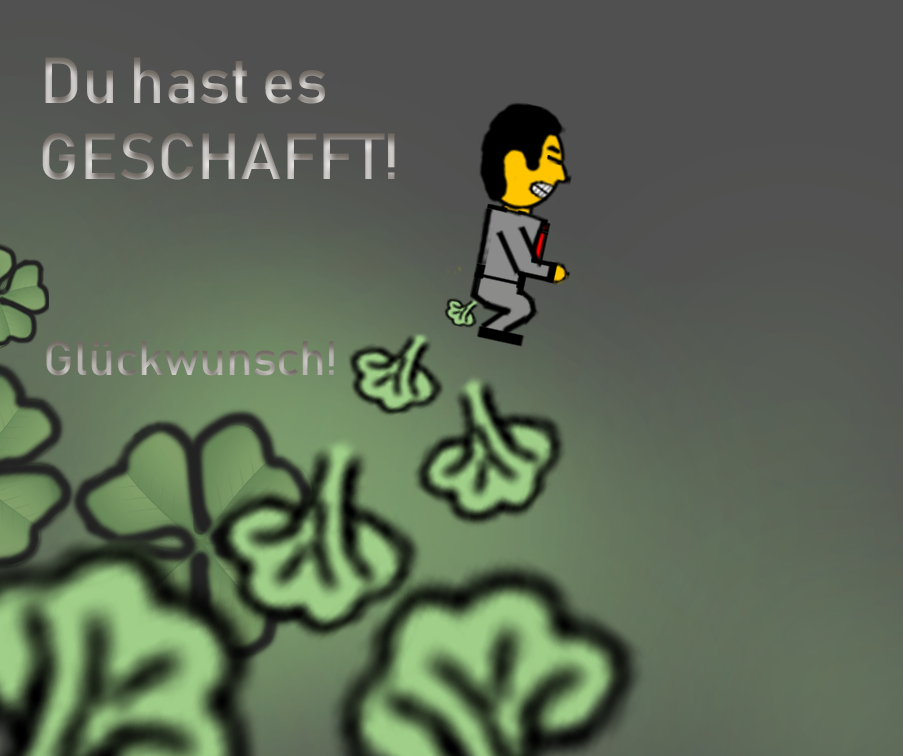
<style>
.page{position:relative;width:903px;height:756px}
.page>*{position:absolute;margin:0}
.t1{font:64px "Bahnschrift"}
.t2{font:48px "Bahnschrift"}
</style>
<div class="page">
<p class="t1" style="left:45px;top:57px;width:280px;height:47px">Du hast es</p>
<p class="t1" style="left:42px;top:133px;width:353px;height:47px">GESCHAFFT!</p>
<p class="t2" style="left:46px;top:340px;width:288px;height:36px">Glückwunsch!</p>
</div>
